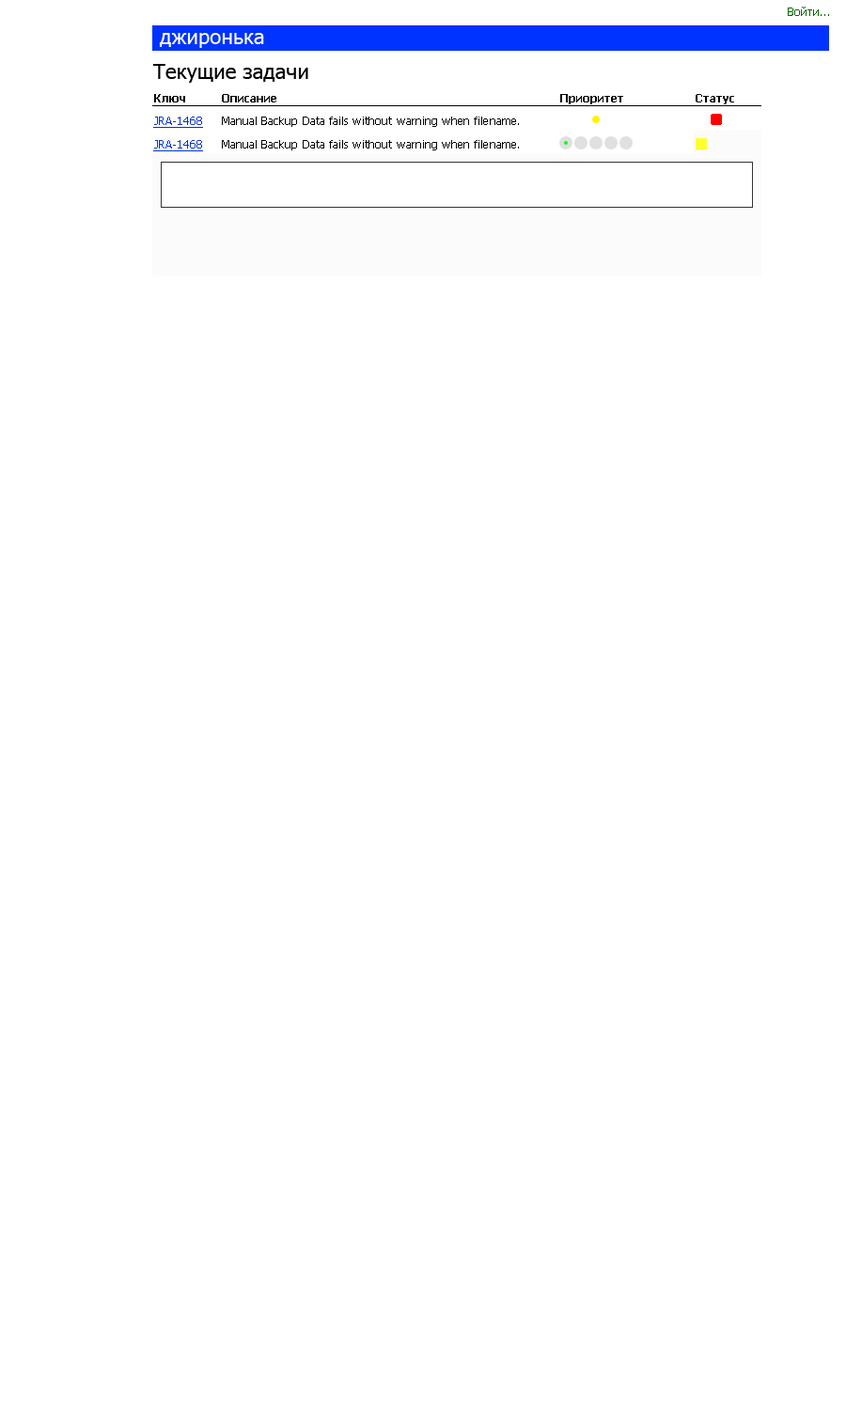
<style>
.page{position:relative;width:846px;height:1410px;background:#ffffff}
.page>*{position:absolute;margin:0}
.t1{font:11.3px "Tahoma";color:#006600}
.t2{font:20.7px "Tahoma";letter-spacing:0.005em;color:#ffffff}
.t3{font:20.7px "Tahoma";letter-spacing:0.005em;color:#000000}
.t4{font:11.3px "Tahoma-Bold";letter-spacing:0.005em;color:#000000}
.t5{font:11.3px "Tahoma";letter-spacing:0.005em;color:#0033cc;text-decoration:underline}
.t6{font:11.3px "Tahoma";letter-spacing:0.005em;color:#000000}
</style>
<div class="page">
<p class="t1" style="left:788px;top:7px;width:41px;height:9px">Войти...</p>
<p class="t2" style="left:159px;top:33px;width:105px;height:15px">джиронька</p>
<p class="t3" style="left:152px;top:64px;width:156px;height:19px">Текущие задачи</p>
<p class="t4" style="left:154px;top:94px;width:31px;height:8px">Ключ</p>
<p class="t4" style="left:222px;top:94px;width:54px;height:8px">Описание</p>
<p class="t4" style="left:560px;top:94px;width:63px;height:10px">Приоритет</p>
<p class="t4" style="left:695px;top:94px;width:39px;height:10px">Статус</p>
<p class="t5" style="left:153px;top:117px;width:50px;height:11px">JRA-1468</p>
<p class="t6" style="left:222px;top:117px;width:297px;height:10px">Manual Backup Data fails without warning when filename.</p>
<p class="t5" style="left:153px;top:140px;width:50px;height:11px">JRA-1468</p>
<p class="t6" style="left:222px;top:140px;width:297px;height:10px">Manual Backup Data fails without warning when filename.</p>
</div>
